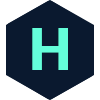
<style>
.page{position:relative;width:100px;height:100px;background:#0a192f}
.page>*{position:absolute;margin:0}
.t1{font:56px "Lato-Black";color:#64ffda}
</style>
<div class="page">
<p class="t1" style="left:32px;top:28px;width:36px;height:42px">H</p>
</div>
